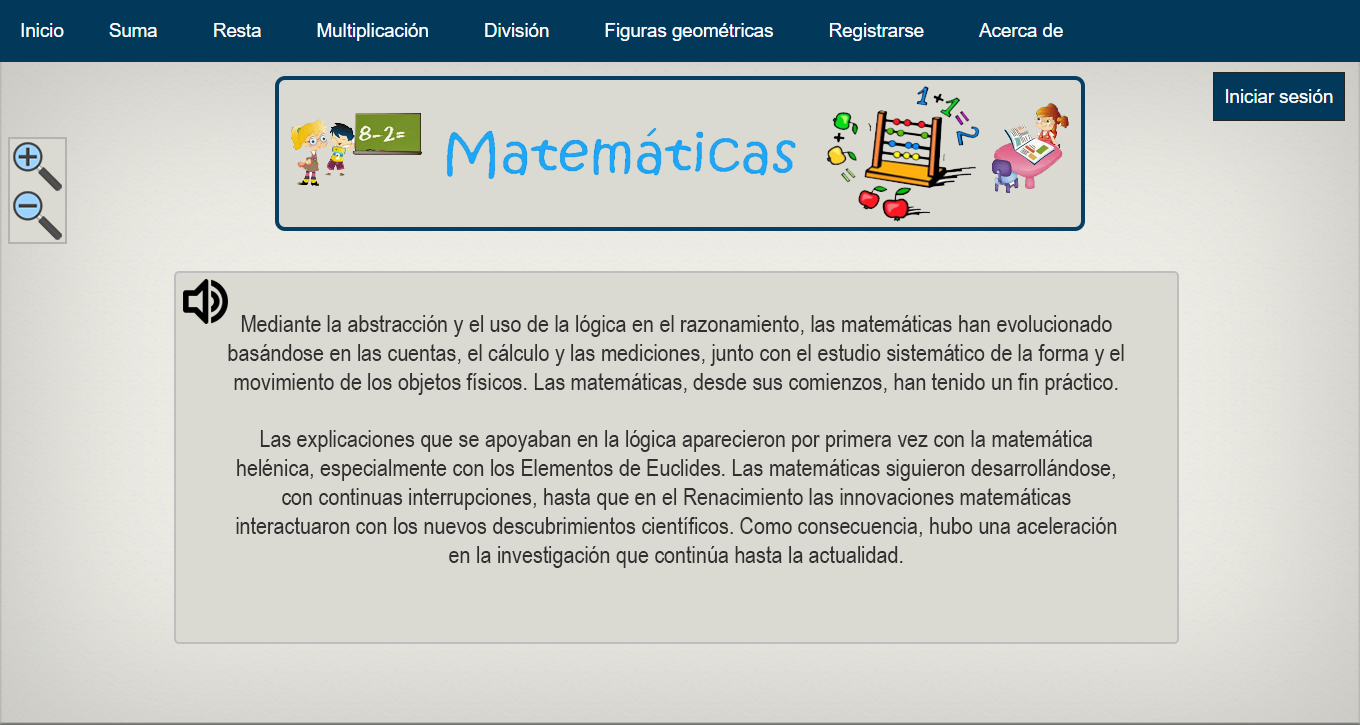
<style>
.page{position:relative;width:1360px;height:725px;background:#dbdad2}
.page>*{position:absolute;margin:0}
.t1{font:24px "ArialNarrow";color:#313030}
</style>
<div class="page">
<p class="t1" style="left:228px;top:315px;width:896px;height:253px;text-align:center">Mediante la abstracción y el uso de la lógica en el razonamiento, las matemáticas han evolucionado basándose en las cuentas, el cálculo y las mediciones, junto con el estudio sistemático de la forma y el movimiento de los objetos físicos. Las matemáticas, desde sus comienzos, han tenido un fin práctico.<br><br>Las explicaciones que se apoyaban en la lógica aparecieron por primera vez con la matemática helénica, especialmente con los Elementos de Euclides. Las matemáticas siguieron desarrollándose, con continuas interrupciones, hasta que en el Renacimiento las innovaciones matemáticas interactuaron con los nuevos descubrimientos científicos. Como consecuencia, hubo una aceleración en la investigación que continúa hasta la actualidad.</p>
</div>
